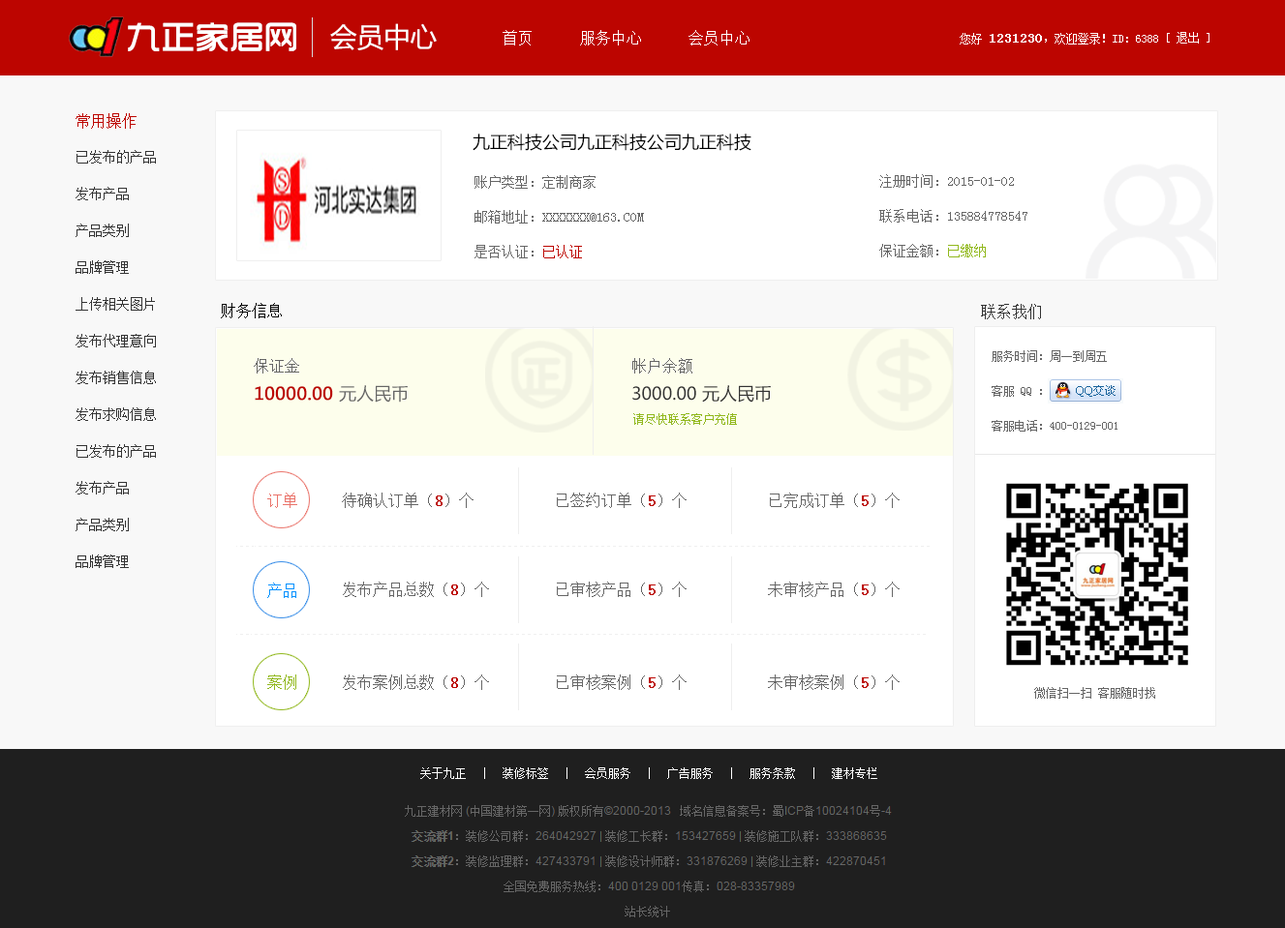
<style>
.page{position:relative;width:1285px;height:928px;background:#ffffff}
.page>*{position:absolute;margin:0}
.t1{font:33.6px "TRENDS";color:#ffffff;font-weight:bold}
.t2{font:27px "MicrosoftYaHei";color:#ffffff}
.t3{font:15.5px "NSimSun";color:#ffffff}
.t4{font:11.6px "NSimSun";color:#ffffff}
.t5{font:13.6px "NSimSun";color:#ffffff;font-weight:bold}
.t6{font:15.5px "NSimSun";color:#bc0500}
.t7{font:17.4px "MicrosoftYaHei";color:#000000}
.t8{font:13.6px/36.8px "NSimSun";color:#333333}
.t9{font:13.6px/34.8px "NSimSun";color:#666666}
.t10{font:13.6px/34.8px "NSimSun";color:#bc0500}
.t11{font:13.6px/34.8px "NSimSun";color:#91b81d}
.t12{font:15.5px "NSimSun";color:#000000}
.t13{font:15.5px "NSimSun";color:#333333}
.t14{font:11.6px/34.8px "NSimSun";color:#666666}
.t15{font:15.5px "NSimSun";color:#666666}
.t16{font:17.4px "MicrosoftYaHei";color:#bc0500;font-weight:bold}
.t17{font:17.4px "MicrosoftYaHei";color:#666666}
.t18{font:17.4px "MicrosoftYaHei";color:#333333}
.t19{font:11.6px "NSimSun";color:#91b81d}
.t20{font:15.5px "NSimSun";color:#ea746b}
.t21{font:15.5px "NSimSun";color:#bc0500;font-weight:bold}
.t22{font:15.5px "NSimSun";color:#0291ff}
.t23{font:15.5px "NSimSun";color:#91b81d}
.t24{font:11.6px "NSimSun";color:#666666}
</style>
<div class="page">
<p class="t1" style="left:128px;top:22px;width:168px;height:30px">九正家居网</p>
<p class="t2" style="left:330px;top:23px;width:107px;height:27px">会员中心</p>
<p class="t3" style="left:502px;top:30px;width:247px;height:15px">首页      服务中心      会员中心</p>
<p class="t4" style="left:959px;top:33px;width:199px;height:12px">您好 <span class="t5">1231230</span>，欢迎登录！ID：6388</p>
<p class="t4" style="left:1166px;top:32px;width:43px;height:12px">[ 退出 ]</p>
<p class="t6" style="left:76px;top:113px;width:60px;height:16px">常用操作</p>
<p class="t7" style="left:472px;top:134px;width:279px;height:17px">九正科技公司九正科技公司九正科技</p>
<p class="t8" style="left:76px;top:150px;width:80px;height:418px">已发布的产品<br>发布产品<br>产品类别<br>品牌管理<br>上传相关图片<br>发布代理意向<br>发布销售信息<br>发布求购信息<br>已发布的产品<br>发布产品<br>产品类别<br>品牌管理</p>
<p class="t9" style="left:474px;top:175px;width:170px;height:83px">账户类型：定制商家<br>邮箱地址：XXXXXXX@163.COM<br>是否认证：<span class="t10">已认证</span></p>
<p class="t9" style="left:879px;top:174px;width:148px;height:83px">注册时间：2015-01-02<br>联系电话：135884778547<br>保证金额：<span class="t11">已缴纳</span></p>
<p class="t12" style="left:221px;top:303px;width:61px;height:15px">财务信息</p>
<p class="t13" style="left:981px;top:304px;width:60px;height:15px">联系我们</p>
<p class="t14" style="left:991px;top:350px;width:126px;height:82px">服务时间：周一到周五<br>客服 QQ ：<br>客服电话：400-0129-001</p>
<p class="t15" style="left:254px;top:358px;width:45px;height:16px">保证金</p>
<p class="t15" style="left:632px;top:358px;width:60px;height:16px">帐户余额</p>
<p class="t16" style="left:255px;top:385px;width:153px;height:18px">10000.00 <span class="t17">元人民币</span></p>
<p class="t18" style="left:632px;top:385px;width:139px;height:18px">3000.00 元人民币</p>
<p class="t19" style="left:633px;top:413px;width:104px;height:12px">请尽快联系客户充值</p>
<p class="t20" style="left:267px;top:493px;width:30px;height:15px">订单</p>
<p class="t15" style="left:342px;top:493px;width:131px;height:15px">待确认订单（<span class="t21">8</span>）个</p>
<p class="t15" style="left:557px;top:493px;width:129px;height:15px">已签约订单（<span class="t21">5</span>）个</p>
<p class="t15" style="left:770px;top:493px;width:129px;height:15px">已完成订单（<span class="t21">5</span>）个</p>
<p class="t15" style="left:343px;top:582px;width:146px;height:15px">发布产品总数（<span class="t21">8</span>）个</p>
<p class="t15" style="left:557px;top:582px;width:129px;height:15px">已审核产品（<span class="t21">5</span>）个</p>
<p class="t15" style="left:768px;top:582px;width:131px;height:15px">未审核产品（<span class="t21">5</span>）个</p>
<p class="t22" style="left:267px;top:583px;width:29px;height:15px">产品</p>
<p class="t23" style="left:267px;top:675px;width:29px;height:15px">案例</p>
<p class="t15" style="left:343px;top:675px;width:146px;height:15px">发布案例总数（<span class="t21">8</span>）个</p>
<p class="t15" style="left:557px;top:675px;width:129px;height:15px">已审核案例（<span class="t21">5</span>）个</p>
<p class="t15" style="left:768px;top:675px;width:131px;height:15px">未审核案例（<span class="t21">5</span>）个</p>
<p class="t24" style="left:1034px;top:687px;width:121px;height:12px">微信扫一扫 客服随时找</p>
</div>
